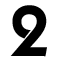
<style>
.page{position:relative;width:64px;height:64px;background:#ffffff}
.page>*{position:absolute;margin:0}
.t1{font:66.7px "(ÇÑ)°¢¸Ó¸®D";color:#000000}
</style>
<div class="page">
<p class="t1" style="left:10px;top:5px;width:37px;height:52px">2</p>
</div>
